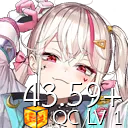
<style>
.page{position:relative;width:128px;height:128px}
.page>*{position:absolute;margin:0}
.t1{font:30px/18px "THSarabunNew";color:#ffffff}
.t2{font:50px "THSarabunNew";color:#ffffff}
</style>
<div class="page">
<p class="t1" style="left:23px;top:82px;width:98px;height:44px;text-align:right"><span class="t2">43.59+<br></span>QC LV 1</p>
</div>
